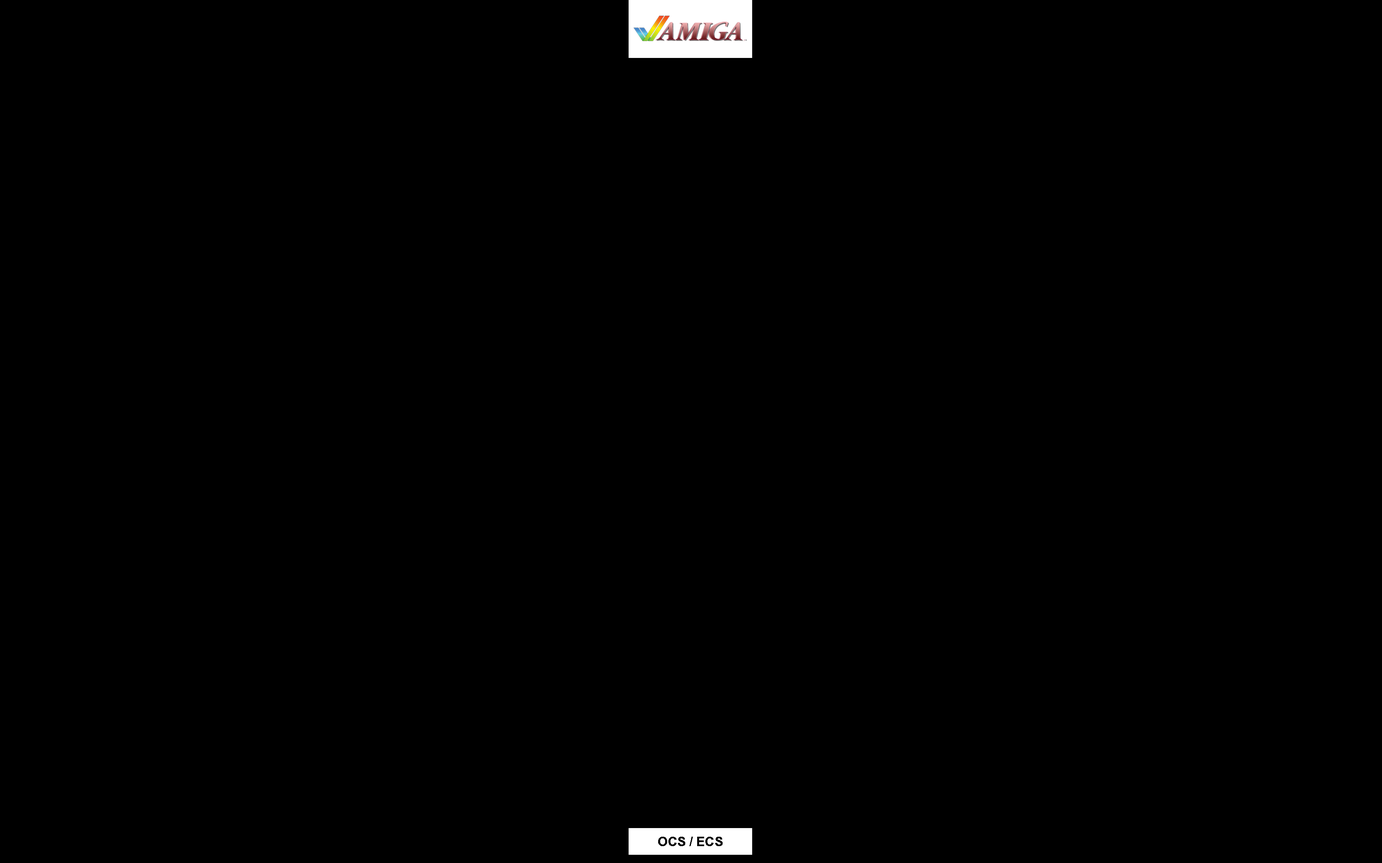
<style>
.page{position:relative;width:1382px;height:863px;background:#000000}
.page>*{position:absolute;margin:0}
.t1{font:19.7px "BrowalliaNew-Bold";color:#000000}
</style>
<div class="page">
<p class="t1" style="left:658px;top:836px;width:65px;height:10px">OCS / ECS</p>
</div>
